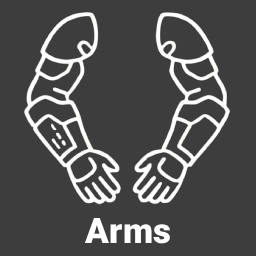
<style>
.page{position:relative;width:256px;height:256px;background:#3d3d3d}
.page>*{position:absolute;margin:0}
.t1{font:35px "Roboto-Black";color:#ffffff}
</style>
<div class="page">
<p class="t1" style="left:84px;top:218px;width:86px;height:26px">Arms</p>
</div>
